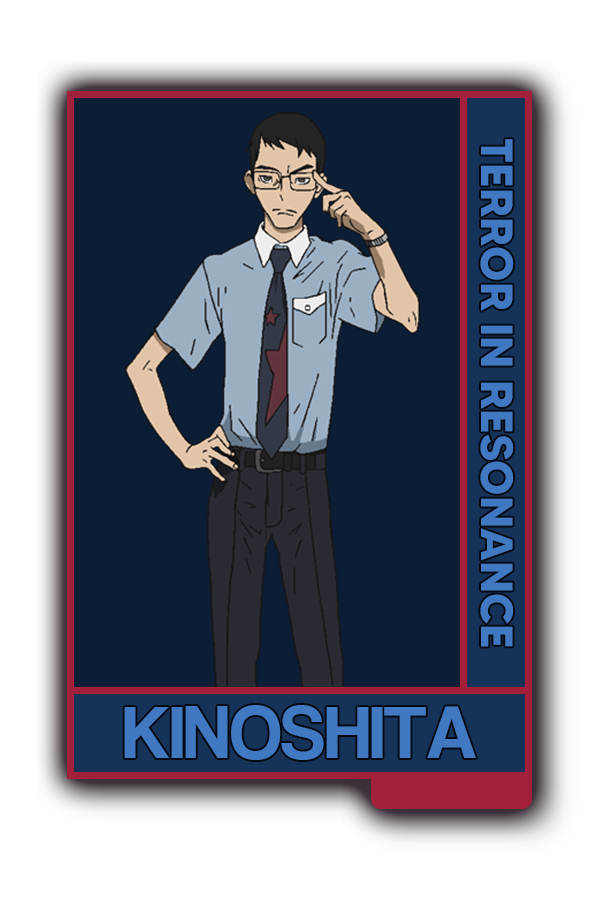
<style>
.page{position:relative;width:600px;height:900px;background:#0c1e35}
.page>*{position:absolute;margin:0}
.t1{font:45.2px "MADETOMMY-Bold";color:#4079c2}
.t2{font:77px "CoolveticaRg-Regular";color:#4079c2}
</style>
<div class="page">
<p class="t1" style="left:480px;top:139px;width:34px;height:508px;rotate:90deg">TERROR IN RESONANCE</p>
<p class="t2" style="left:124px;top:705px;width:352px;height:55px">KINOSHITA</p>
</div>
